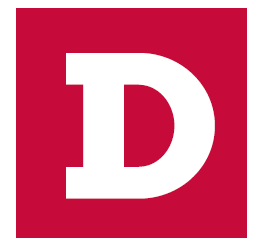
<style>
.page{position:relative;width:260px;height:240px;background:#c60b3a}
.page>*{position:absolute;margin:0}
.t1{font:187.8px "Fela";letter-spacing:0.075em;color:#ffffff}
</style>
<div class="page">
<p class="t1" style="left:66px;top:53px;width:149px;height:146px">D</p>
</div>
